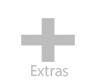
<style>
.page{position:relative;width:96px;height:80px;background:#ffffff}
.page>*{position:absolute;margin:0}
.t1{font:15.4px "SegoeUI";color:#bdbdbd}
</style>
<div class="page">
<p class="t1" style="left:31px;top:65px;width:38px;height:12px">Extras</p>
</div>
